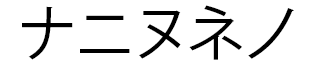
<style>
.page{position:relative;width:320px;height:64px;background:#ffffff}
.page>*{position:absolute;margin:0}
.t1{font:60px "KozGoPr6N-Regular";color:#000000}
</style>
<div class="page">
<p class="t1" style="left:22px;top:5px;width:272px;height:55px">ナニヌネノ</p>
</div>
